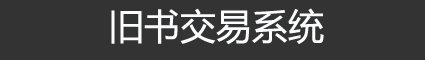
<style>
.page{position:relative;width:425px;height:60px;background:#333333}
.page>*{position:absolute;margin:0}
.t1{font:36px "MicrosoftYaHei";color:#fbfcfd}
</style>
<div class="page">
<p class="t1" style="left:111px;top:8px;width:213px;height:37px">旧书交易系统</p>
</div>
